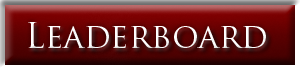
<style>
.page{position:relative;width:300px;height:70px}
.page>*{position:absolute;margin:0}
.t1{font:33.3px "TrajanPro-Regular";color:#ffffff}
</style>
<div class="page">
<p class="t1" style="left:28px;top:22px;width:238px;height:27px">Leaderboard</p>
</div>
